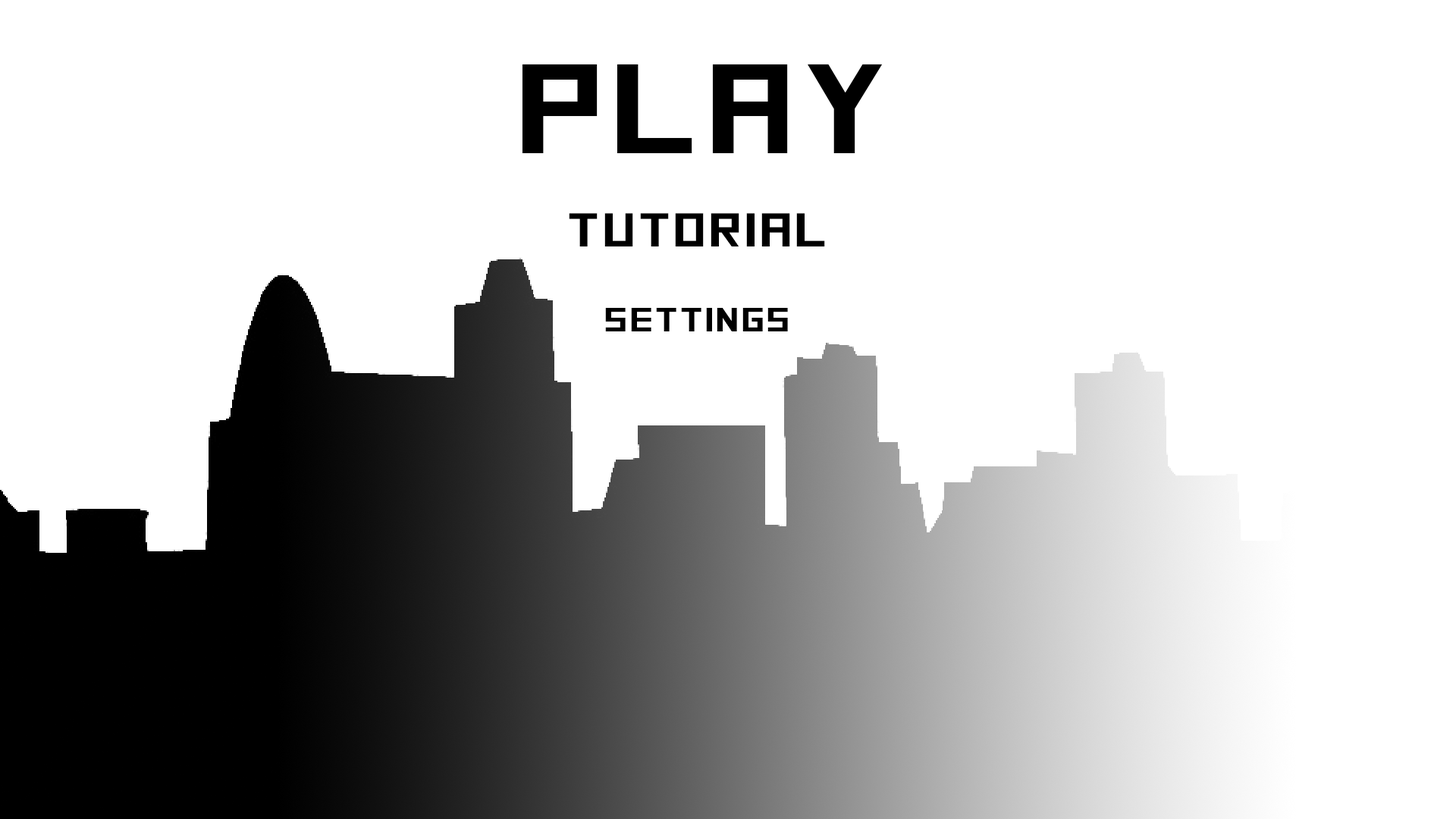
<style>
.page{position:relative;width:1456px;height:819px;background:#ffffff}
.page>*{position:absolute;margin:0}
.t1{font:126.9px "SquareFont";letter-spacing:0.035em;color:#000000;scale:1.22 1}
.t2{font:47.2px "SquareFont";letter-spacing:0.035em;color:#000000;scale:1.22 1}
.t3{font:33.6px "SquareFont";letter-spacing:0.035em;color:#000000;scale:1.22 1}
</style>
<div class="page">
<p class="t1" style="left:522px;top:64px;width:361px;height:89px">PLAY</p>
<p class="t2" style="left:569px;top:213px;width:256px;height:33px">Tutorial</p>
<p class="t3" style="left:605px;top:308px;width:183px;height:23px">Settings</p>
</div>
